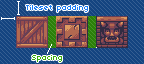
<style>
.page{position:relative;width:144px;height:64px;background:#144480}
.page>*{position:absolute;margin:0}
.t1{font:8px "04b03";color:#1c7cf2}
.t2{font:8px "04b03";color:#3aac0c}
</style>
<div class="page">
<p class="t1" style="left:26px;top:5px;width:62px;height:7px">Tileset padding</p>
<p class="t2" style="left:32px;top:55px;width:30px;height:7px">Spacing</p>
</div>
